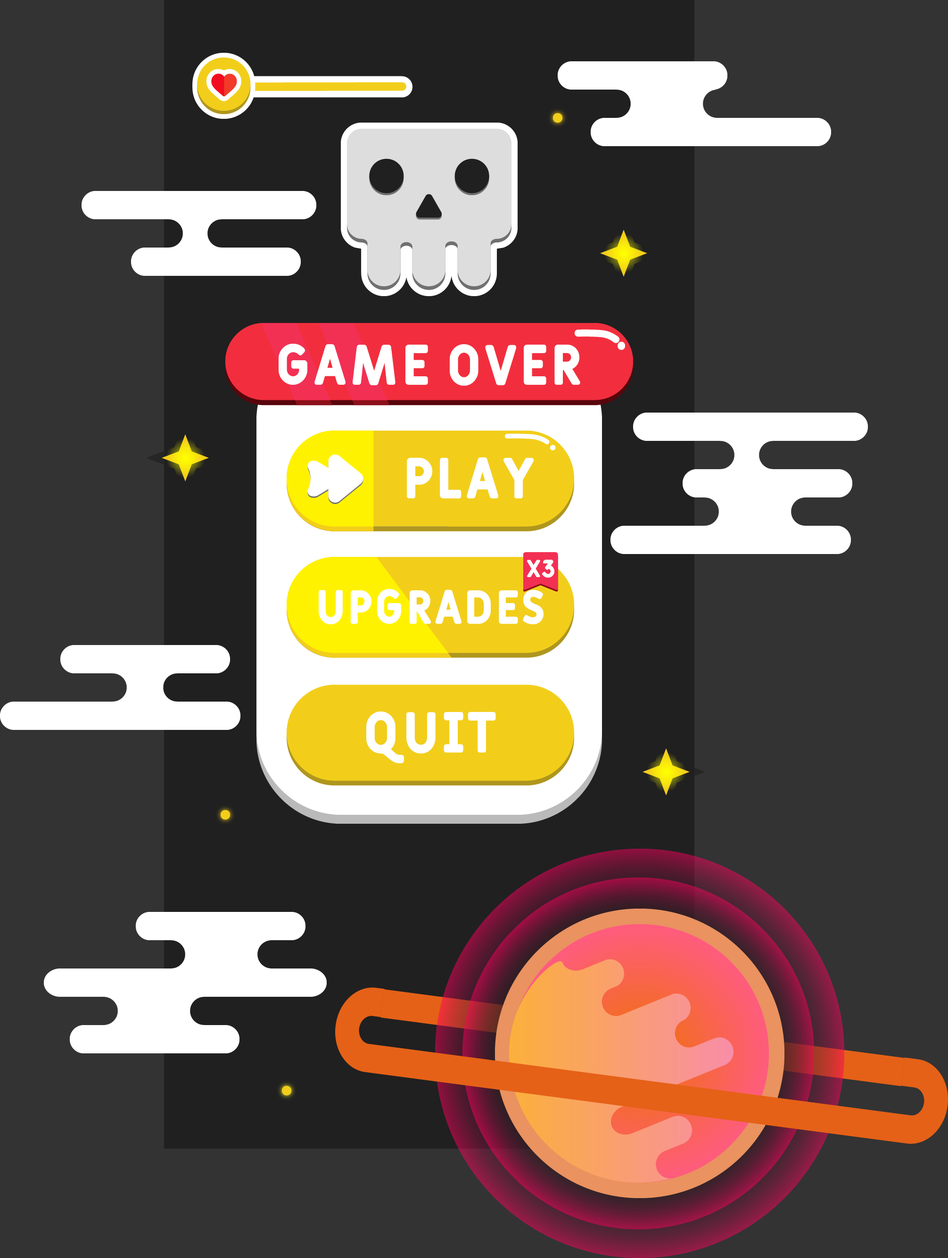
<style>
.page{position:relative;width:948px;height:1258px;background:#333333}
.page>*{position:absolute;margin:0}
.t1{font:56.6px "Fulbo-Argenta";color:#ffffff}
.t2{font:57.5px "Fulbo-Argenta";color:#ffffff}
.t3{font:24.4px "Fulbo-Argenta";color:#ffffff}
.t4{font:47.6px "Fulbo-Argenta";color:#ffffff}
</style>
<div class="page">
<p class="t1" style="left:279px;top:343px;width:301px;height:43px">Game over</p>
<p class="t2" style="left:407px;top:457px;width:127px;height:42px">Play</p>
<p class="t3" style="left:527px;top:560px;width:27px;height:18px">X3</p>
<p class="t4" style="left:319px;top:589px;width:225px;height:35px">Upgrades</p>
<p class="t2" style="left:366px;top:711px;width:130px;height:52px">Quit</p>
</div>
